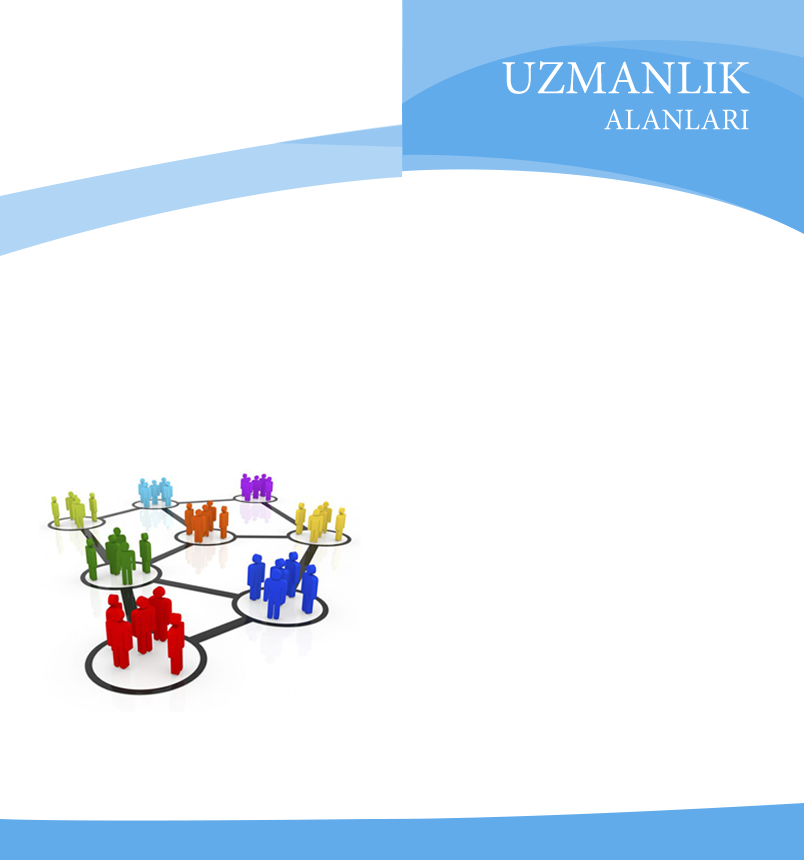
<style>
.page{position:relative;width:804px;height:860px;background:#ffffff}
.page>*{position:absolute;margin:0}
.t1{font:47.6px "MinionPro-Regular";color:#ffffff}
.t2{font:30px "MinionPro-Regular";color:#ffffff}
</style>
<div class="page">
<p class="t1" style="left:502px;top:61px;width:248px;height:69px;text-align:right">UZMANLIK<br><span class="t2"> ALANLARI</span></p>
</div>
